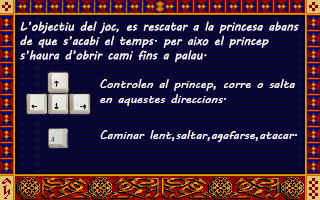
<style>
.page{position:relative;width:320px;height:200px;background:#100061}
.page>*{position:absolute;margin:0}
.t1{font:12px "MVBoli";color:#fefefe}
</style>
<div class="page">
<p class="t1" style="left:20px;top:21px;width:279px;height:42px">L’objectiu del joc, es rescatar a la princesa abans<br>de que s’acabi el temps. per aixo el princep<br>s’haura d’obrir cami fins a palau.</p>
<p class="t1" style="left:100px;top:79px;width:195px;height:27px">Controlen al princep, corre o salta<br>en aquestes direccions.</p>
<p class="t1" style="left:100px;top:130px;width:197px;height:12px">Caminar lent,saltar,agafarse,atacar.</p>
</div>
